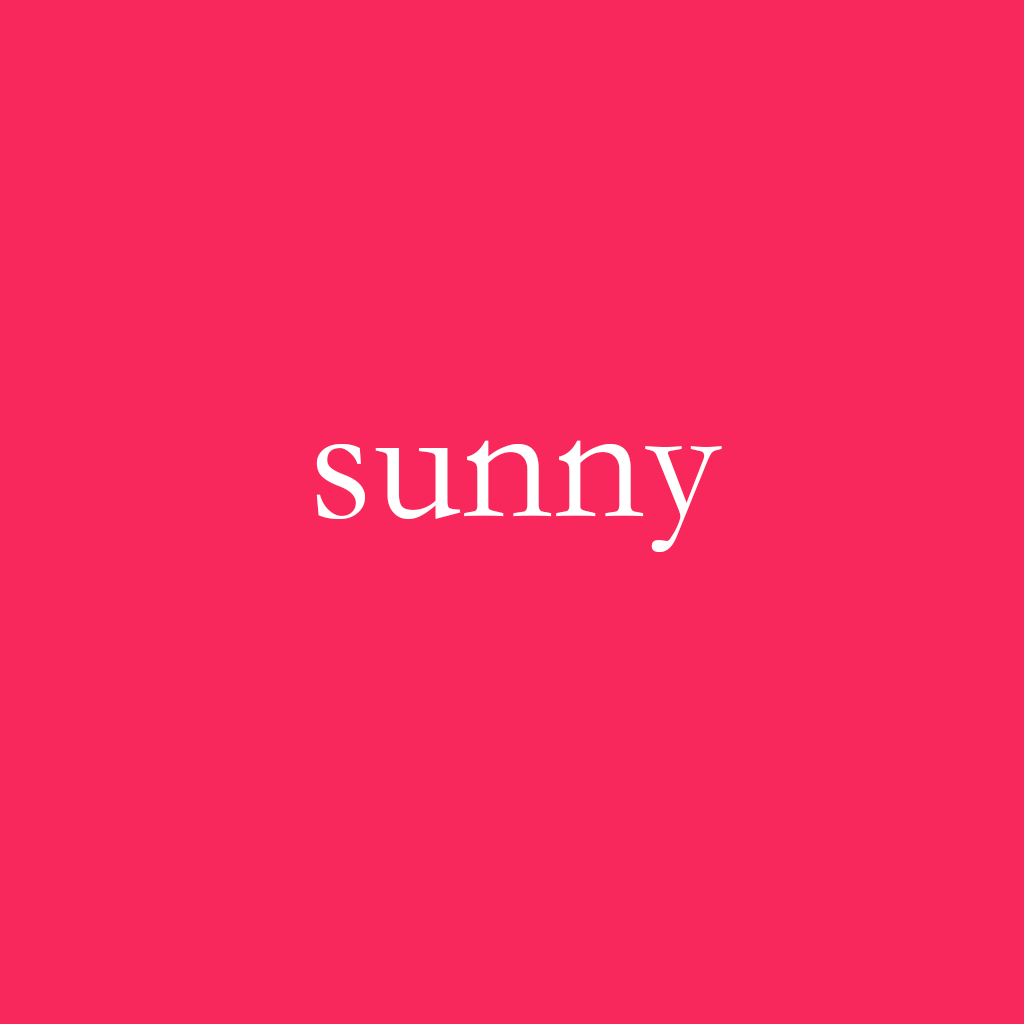
<style>
.page{position:relative;width:1024px;height:1024px;background:#f8285c}
.page>*{position:absolute;margin:0}
.t1{font:180px "STFangsong";color:#ffffff}
</style>
<div class="page">
<p class="t1" style="left:316px;top:440px;width:406px;height:112px">sunny</p>
</div>
